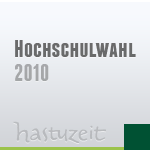
<style>
.page{position:relative;width:150px;height:150px}
.page>*{position:absolute;margin:0}
.t1{font:24px "Franchise-Bold";color:#696a6b;scale:1.05 1}
.t2{font:24px "Franchise-Bold";color:#a6a7a9;scale:1.05 1}
</style>
<div class="page">
<p class="t1" style="left:15px;top:40px;width:121px;height:17px">Hochschulwahl</p>
<p class="t2" style="left:15px;top:64px;width:34px;height:17px">2010</p>
</div>
